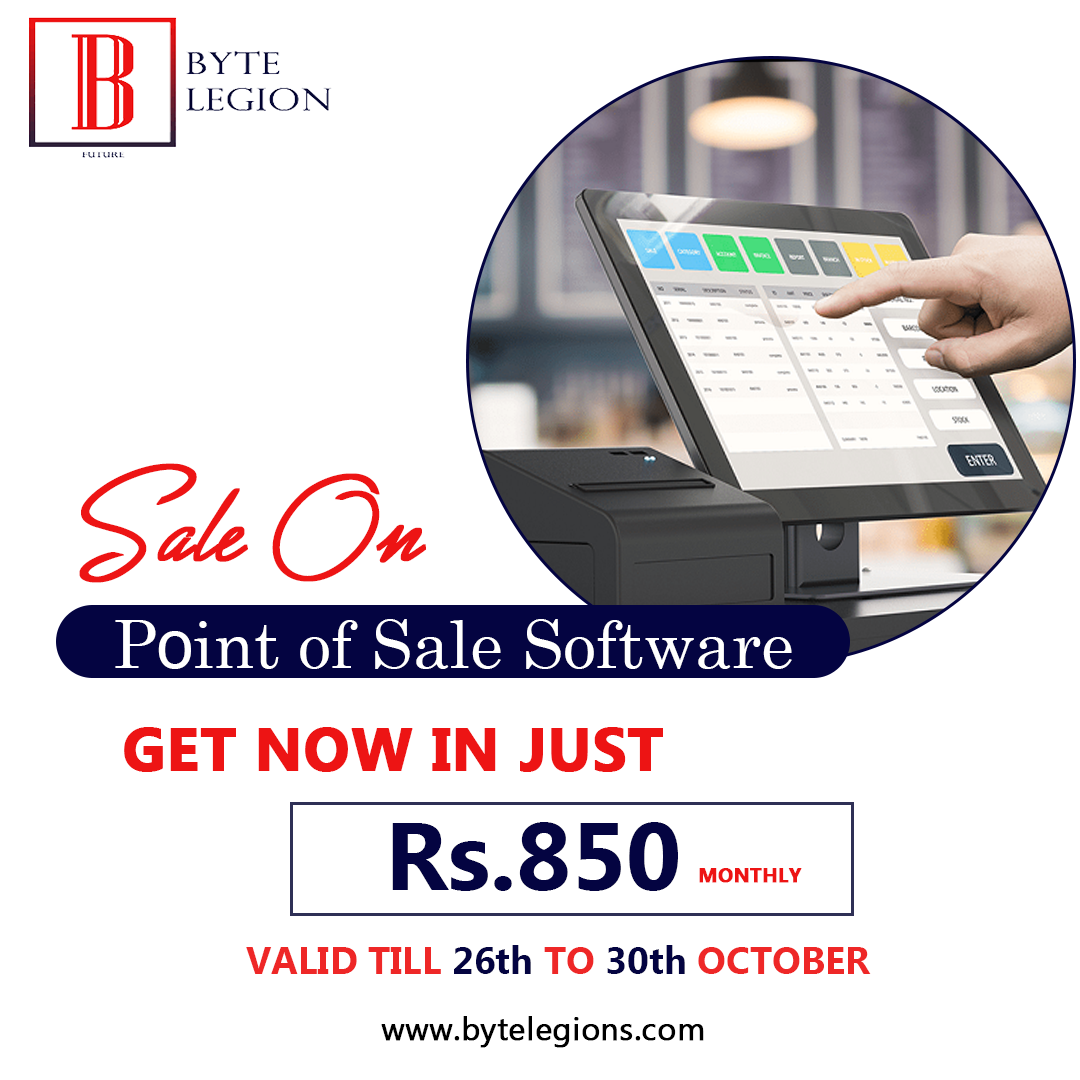
<style>
.page{position:relative;width:1080px;height:1080px;background:#ffffff}
.page>*{position:absolute;margin:0}
.t1{font:90px "GreatDayPersonalUse";color:#ed1414;font-weight:bold}
.t2{font:66px "CenturySchoolbook";color:#fefeff}
.t3{font:66px "Tahoma";color:#fefeff}
.t4{font:60px "MyanmarText-Bold";color:#ed1414;text-transform:uppercase;font-weight:bold}
.t5{font:96px "MyanmarText-Bold";color:#040441;text-transform:uppercase}
.t6{font:96px "MyanmarText-Bold";color:#040441}
.t7{font:20px "MyanmarText-Bold";color:#ed1414;text-transform:uppercase;font-weight:bold}
.t8{font:38px "MyanmarText-Bold";color:#ee2727;text-transform:uppercase}
.t9{font:38px "MyanmarText-Bold";color:#040441;text-transform:uppercase}
.t10{font:38px "MyanmarText-Bold";color:#040441}
.t11{font:32px "MyanmarText";color:#000000;font-weight:bold}
</style>
<div class="page">
<p class="t1" style="left:79px;top:463px;width:347px;height:120px">Sale On</p>
<p class="t2" style="left:115px;top:619px;width:677px;height:50px">P<span class="t3">o</span>int of Sale Software</p>
<p class="t4" style="left:124px;top:727px;width:539px;height:45px">Get now in just</p>
<p class="t5" style="left:392px;top:822px;width:286px;height:69px">r<span class="t6">s</span>.850</p>
<p class="t7" style="left:699px;top:868px;width:103px;height:15px">monthly</p>
<p class="t8" style="left:246px;top:945px;width:625px;height:29px">Valid till <span class="t9">26</span><span class="t10">th</span> to <span class="t9">30</span><span class="t10">th</span> october</p>
<p class="t11" style="left:381px;top:1016px;width:323px;height:32px">www.bytelegions.com</p>
</div>
